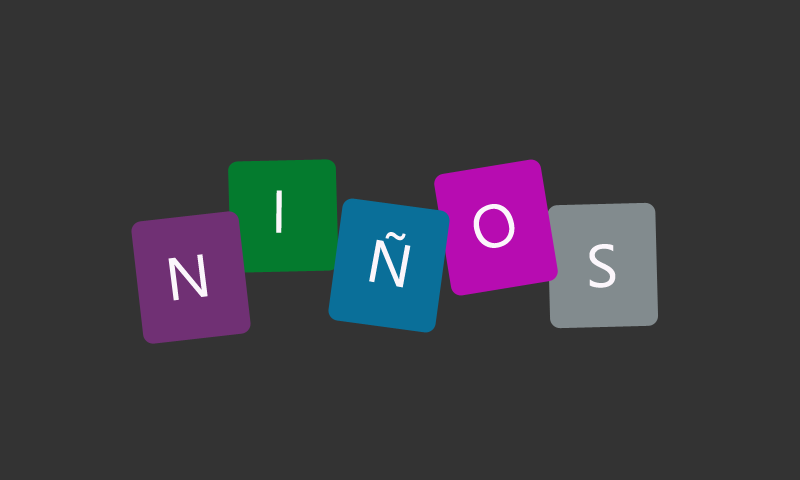
<style>
.page{position:relative;width:800px;height:480px;background:#333333}
.page>*{position:absolute;margin:0}
.t1{font:60px "LeelawadeeUI";color:#fbf6fb}
</style>
<div class="page">
<p class="t1" style="left:276px;top:190px;width:6px;height:43px;rotate:1deg">I</p>
<p class="t1" style="left:473px;top:204px;width:42px;height:44px;rotate:-18deg">O</p>
<p class="t1" style="left:369px;top:232px;width:42px;height:56px;rotate:10deg">Ñ</p>
<p class="t1" style="left:589px;top:244px;width:27px;height:44px;rotate:-1deg">S</p>
<p class="t1" style="left:168px;top:254px;width:40px;height:47px;rotate:-7deg">N</p>
</div>
